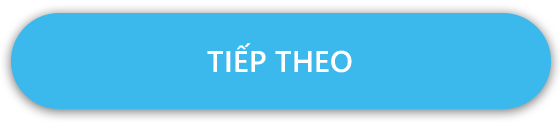
<style>
.page{position:relative;width:560px;height:124px;background:#3bb8ec}
.page>*{position:absolute;margin:0}
.t1{font:30px "SegoeUI-Semibold";color:#ffffff;text-transform:uppercase}
</style>
<div class="page">
<p class="t1" style="left:207px;top:43px;width:145px;height:30px">TIẾP tHEO</p>
</div>
